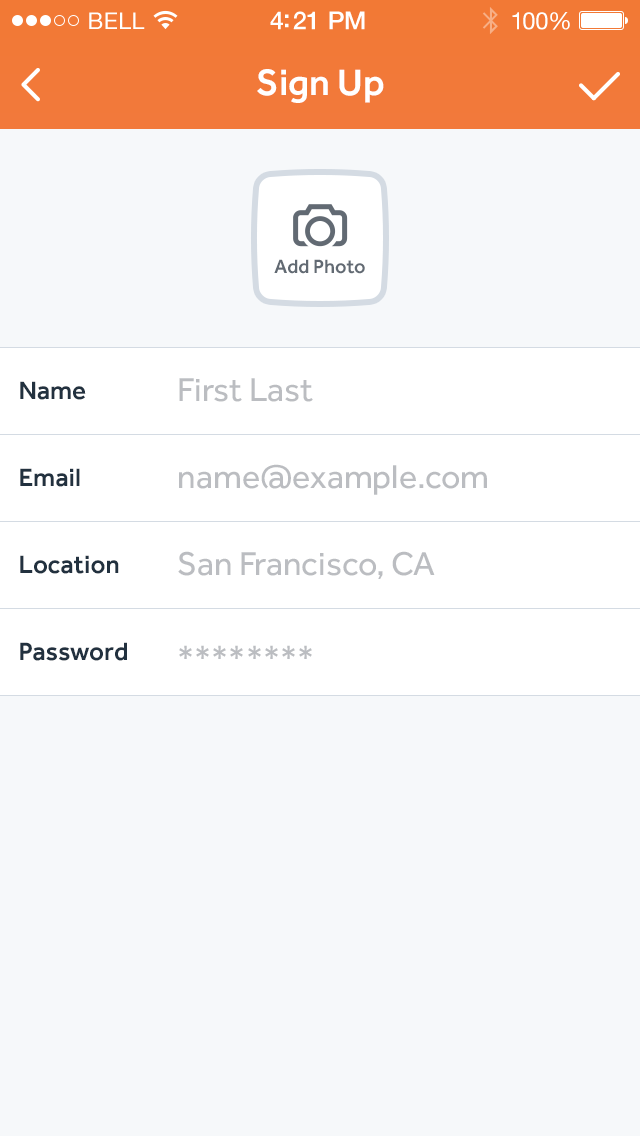
<style>
.page{position:relative;width:640px;height:1136px;background:#f6f8fa}
.page>*{position:absolute;margin:0}
.t1{font:23px "HelveticaNeue";letter-spacing:0.02em;color:#ffffff}
.t2{font:25px "HelveticaNeue-Medium";letter-spacing:-0.02em;color:#ffffff}
.t3{font:24px "HelveticaNeue";letter-spacing:-0.02em;color:#ffffff}
.t4{font:38px "Effra-Medium";color:#ffffff}
.t5{font:20px "Effra-Medium";color:#626a73}
.t6{font:26px "Effra-Medium";color:#22313f}
.t7{font:34px "Effra-Regular";color:#bbbdc1}
</style>
<div class="page">
<p class="t1" style="left:89px;top:12px;width:56px;height:17px">BELL</p>
<p class="t2" style="left:270px;top:11px;width:95px;height:19px">4:21 PM</p>
<p class="t3" style="left:512px;top:12px;width:58px;height:18px">100%</p>
<p class="t4" style="left:257px;top:69px;width:127px;height:34px">Sign Up</p>
<p class="t5" style="left:274px;top:259px;width:91px;height:15px">Add Photo</p>
<p class="t6" style="left:20px;top:381px;width:66px;height:19px">Name</p>
<p class="t7" style="left:179px;top:378px;width:134px;height:24px">First Last</p>
<p class="t6" style="left:20px;top:468px;width:60px;height:19px">Email</p>
<p class="t7" style="left:179px;top:464px;width:308px;height:31px">name@example.com</p>
<p class="t6" style="left:20px;top:555px;width:99px;height:19px">Location</p>
<p class="t7" style="left:178px;top:551px;width:257px;height:28px">San Francisco, CA</p>
<p class="t6" style="left:20px;top:642px;width:107px;height:19px">Password</p>
<p class="t7" style="left:179px;top:645px;width:133px;height:14px">********</p>
</div>
